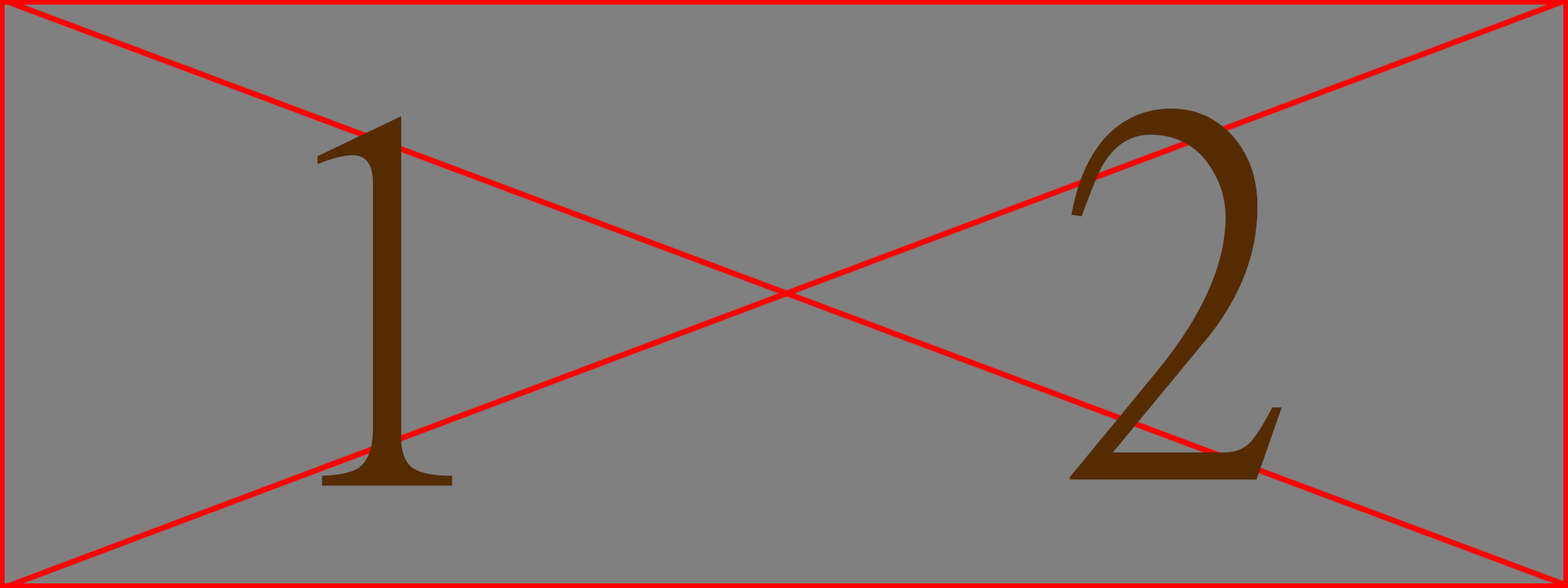
<style>
.page{position:relative;width:1568px;height:588px;background:#808080}
.page>*{position:absolute;margin:0}
.t1{font:505.8px "MingLiU";color:#552c02}
</style>
<div class="page">
<p class="t1" style="left:1070px;top:108px;width:212px;height:372px">2</p>
<p class="t1" style="left:317px;top:116px;width:135px;height:370px">1</p>
</div>
